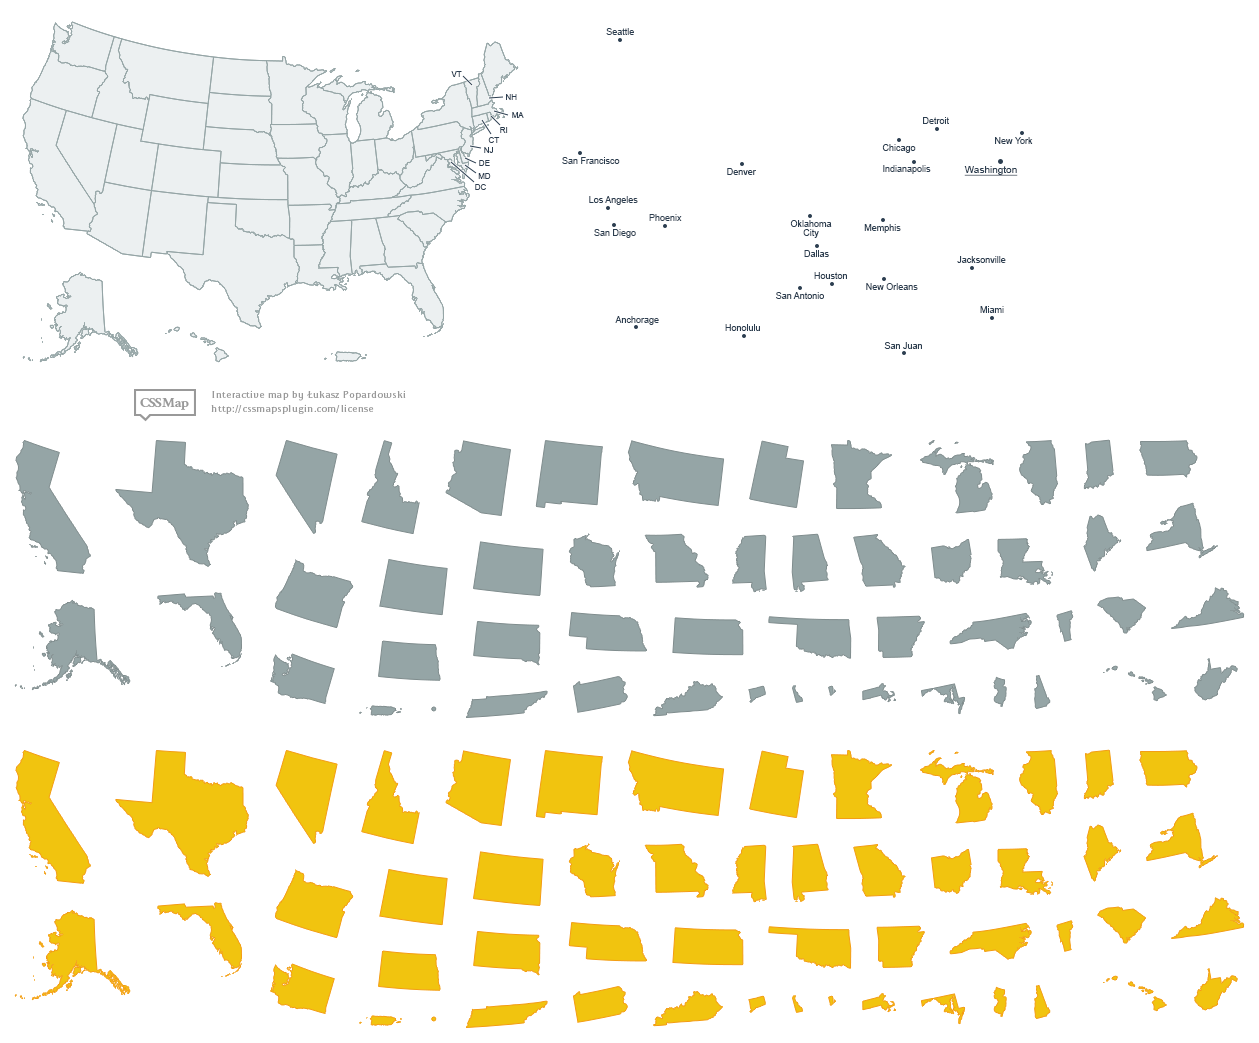
<style>
.page{position:relative;width:1259px;height:1043px;background:#ffffff}
.page>*{position:absolute;margin:0}
.t1{font:9px "ArialMT";color:#2c3e50}
.t2{font:8px "ArialMT";color:#2c3e50}
.t3{font:10px "ArialMT";color:#2c3e50;text-decoration:underline}
.t4{font:9px/9px "ArialMT";color:#2c3e50}
</style>
<div class="page">
<p class="t1" style="left:606px;top:28px;width:28px;height:7px">Seattle</p>
<p class="t2" style="left:451px;top:71px;width:11px;height:6px">VT</p>
<p class="t2" style="left:506px;top:94px;width:11px;height:6px">NH</p>
<p class="t2" style="left:512px;top:112px;width:12px;height:6px">MA</p>
<p class="t1" style="left:923px;top:117px;width:26px;height:7px">Detroit</p>
<p class="t2" style="left:488px;top:137px;width:12px;height:6px">CT</p>
<p class="t2" style="left:500px;top:127px;width:8px;height:6px">RI</p>
<p class="t1" style="left:995px;top:137px;width:38px;height:7px">New York</p>
<p class="t2" style="left:484px;top:147px;width:9px;height:6px">NJ</p>
<p class="t1" style="left:882px;top:144px;width:34px;height:9px">Chicago</p>
<p class="t2" style="left:479px;top:160px;width:11px;height:6px">DE</p>
<p class="t1" style="left:562px;top:157px;width:58px;height:7px">San Francisco</p>
<p class="t2" style="left:478px;top:173px;width:13px;height:6px">MD</p>
<p class="t1" style="left:727px;top:168px;width:29px;height:7px">Denver</p>
<p class="t1" style="left:883px;top:165px;width:48px;height:9px">Indianapolis</p>
<p class="t3" style="left:964px;top:166px;width:54px;height:10px">Washington</p>
<p class="t2" style="left:475px;top:184px;width:11px;height:6px">DC</p>
<p class="t1" style="left:589px;top:196px;width:49px;height:9px">Los Angeles</p>
<p class="t1" style="left:649px;top:214px;width:33px;height:7px">Phoenix</p>
<p class="t4" style="left:790px;top:220px;width:42px;height:18px;text-align:center">Oklahoma<br>City</p>
<p class="t1" style="left:594px;top:229px;width:42px;height:9px">San Diego</p>
<p class="t1" style="left:864px;top:224px;width:37px;height:9px">Memphis</p>
<p class="t1" style="left:804px;top:250px;width:25px;height:7px">Dallas</p>
<p class="t1" style="left:957px;top:256px;width:49px;height:7px">Jacksonville</p>
<p class="t1" style="left:814px;top:272px;width:33px;height:7px">Houston</p>
<p class="t1" style="left:776px;top:292px;width:48px;height:7px">San Antonio</p>
<p class="t1" style="left:866px;top:283px;width:52px;height:7px">New Orleans</p>
<p class="t1" style="left:615px;top:316px;width:44px;height:9px">Anchorage</p>
<p class="t1" style="left:980px;top:306px;width:24px;height:7px">Miami</p>
<p class="t1" style="left:725px;top:324px;width:35px;height:7px">Honolulu</p>
<p class="t1" style="left:884px;top:342px;width:38px;height:7px">San Juan</p>
</div>
